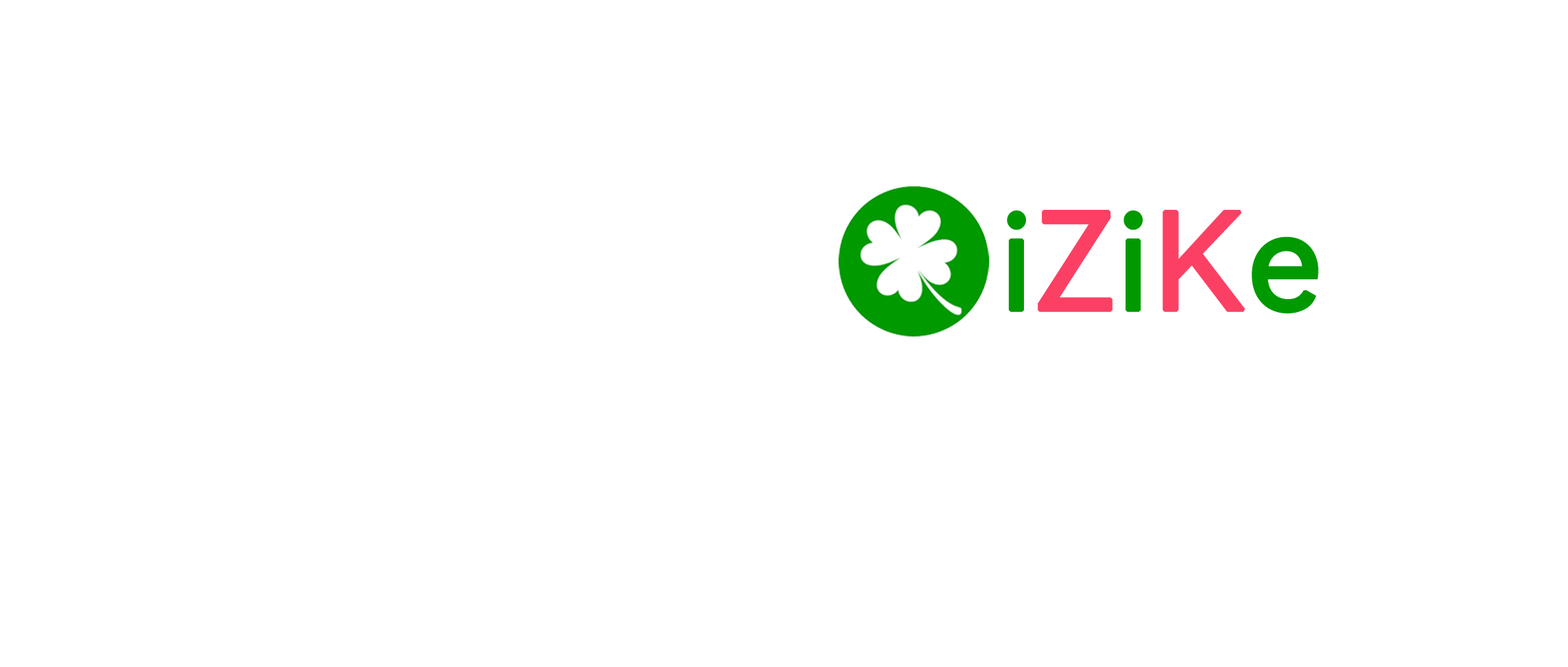
<style>
.page{position:relative;width:1568px;height:667px;background:#ffffff}
.page>*{position:absolute;margin:0}
.t1{font:134.2px "HarmonyOS_Sans_SC";color:#009900;font-weight:bold}
.t2{font:134.2px "HarmonyOS_Sans_SC";color:#fc4064;font-weight:bold}
</style>
<div class="page">
<p class="t1" style="left:1007px;top:210px;width:311px;height:104px">i<span class="t2">Z</span>i<span class="t2">K</span>e</p>
</div>
